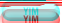
<style>
.page{position:relative;width:62px;height:23px}
.page>*{position:absolute;margin:0}
.t1{font:10px "Helvetica-Condensed-Bold";letter-spacing:-0.01em}
</style>
<div class="page">
<p class="t1" style="left:23px;top:7px;width:16px;height:8px">YIM</p>
</div>
